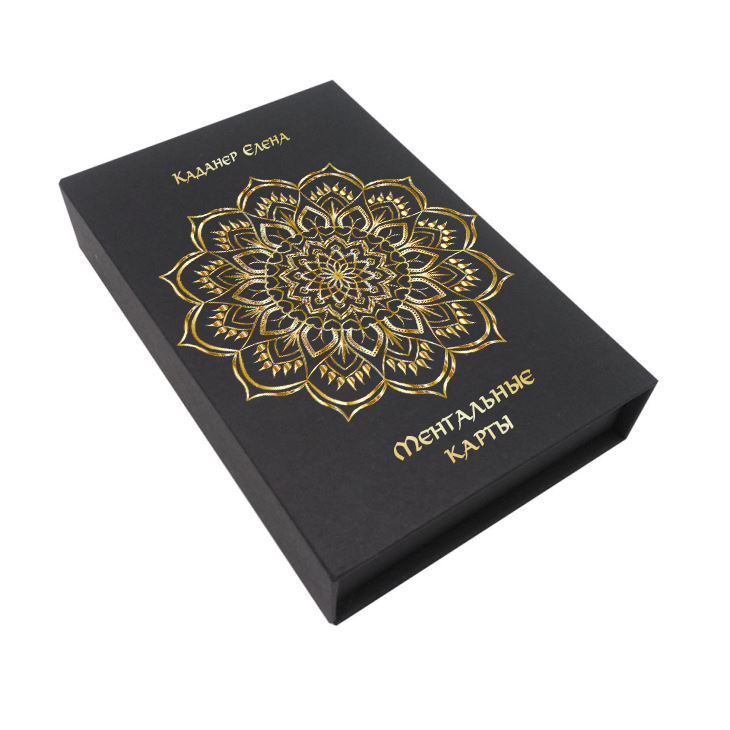
<style>
.page{position:relative;width:730px;height:730px;background:#ffffff}
.page>*{position:absolute;margin:0}
.t1{font:14.7px "VikingTYGRA";font-weight:bold;scale:0.84 1}
.t2{font:24px "VikingTYGRA";font-weight:bold;scale:0.84 1}
</style>
<div class="page">
<p class="t1" style="left:171px;top:133px;width:119px;height:52px;rotate:-22deg">Каданер Елена</p>
<p class="t2" style="left:394px;top:369px;width:141px;height:95px;text-align:center;rotate:-31deg">Ментальные<br>карты</p>
</div>
